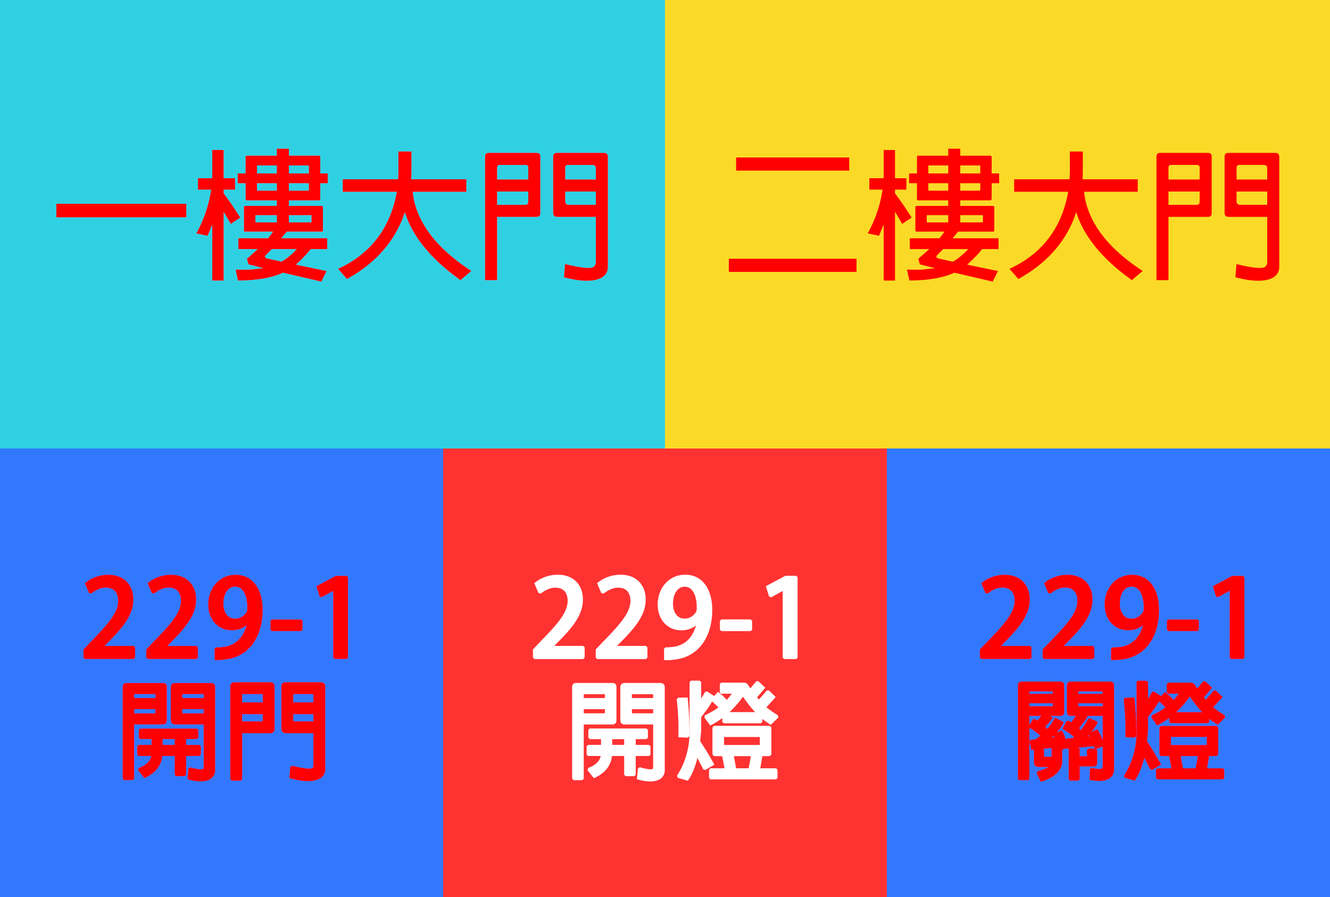
<style>
.page{position:relative;width:1330px;height:897px;background:#3278ff}
.page>*{position:absolute;margin:0}
.t1{font:141.8px "AdobeFanHeitiStd-Bold";color:#ff0000}
.t2{font:106.4px/113.5px "AdobeFanHeitiStd-Bold";color:#ff0000;font-weight:bold}
.t3{font:106.4px/113.5px "AdobeFanHeitiStd-Bold";color:#ffffff;font-weight:bold}
</style>
<div class="page">
<p class="t1" style="left:56px;top:148px;width:552px;height:134px">一樓大門</p>
<p class="t1" style="left:728px;top:148px;width:551px;height:134px">二樓大門</p>
<p class="t2" style="left:83px;top:574px;width:265px;height:207px;text-align:center">229-1<br>開門</p>
<p class="t3" style="left:532px;top:574px;width:266px;height:207px;text-align:center">229-1<br>開燈</p>
<p class="t2" style="left:979px;top:574px;width:266px;height:208px;text-align:center">229-1<br>關燈</p>
</div>
